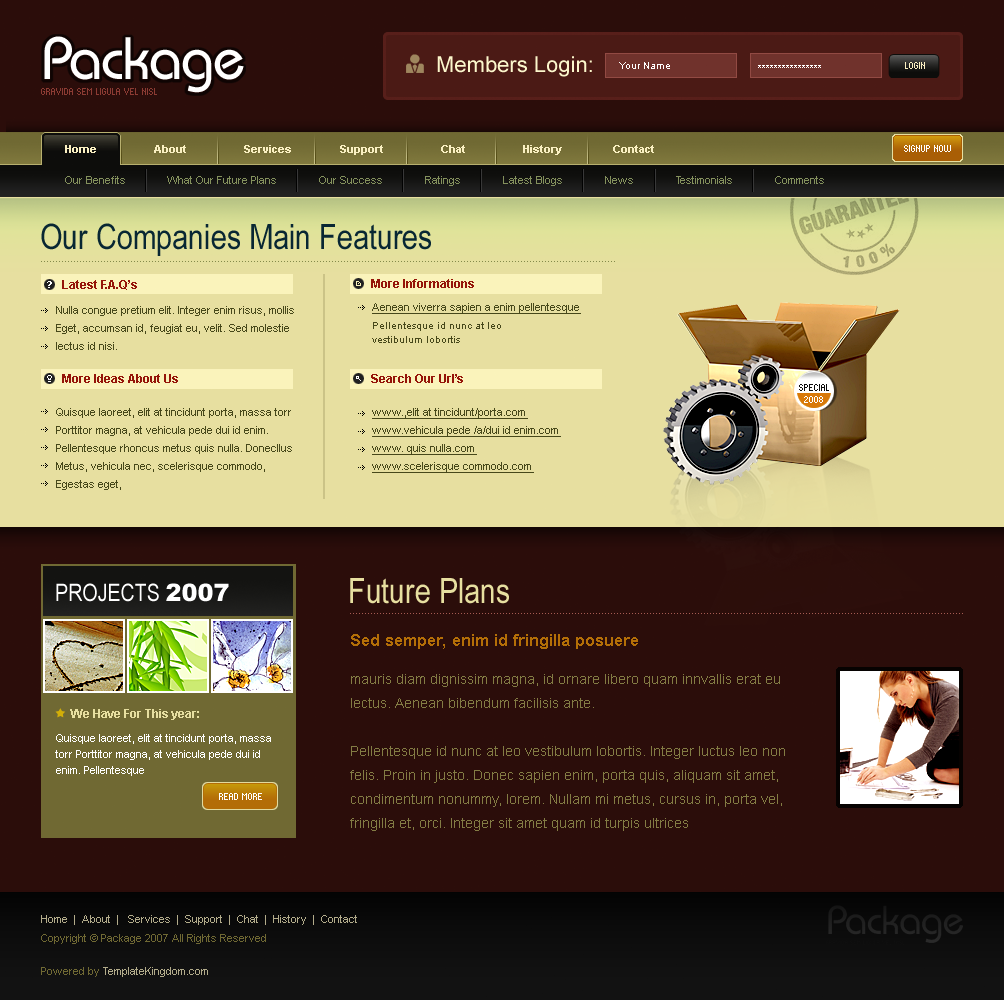
<style>
.page{position:relative;width:1004px;height:1000px;background:#2b0d0a}
.page>*{position:absolute;margin:0}
.t1{font:59.6px "BauhausITCbyBT-Medium";letter-spacing:-0.025em;color:#ffffff}
.t2{font:22px "ArialMT";color:#fcf7cc}
.t3{font:10px "ArialMT";color:#ffffff}
.t4{font:8px "Standard0757";color:#faf0c2;text-transform:uppercase}
.t5{font:8px "Standard0757";color:#8c3b33;text-transform:uppercase}
.t6{font:11px "Arial-BoldMT";color:#faf0c2}
.t7{font:8px "Standard0757";color:#ffffff;text-transform:uppercase}
.t8{font:11px "ArialMT";color:#84915d}
.t9{font:35px "ArialNarrow";color:#082733}
.t10{font:9px "Tahoma-Bold";color:#ffffff}
.t11{font:12px "Arial-BoldMT";color:#951509}
.t12{font:11px/18px "ArialMT";color:#47481a;text-decoration:underline}
.t13{font:10px/18px "ArialMT";color:#47481a}
.t14{font:10px/14px "ArialMT";color:#47481a}
.t15{font:11px/18px "ArialMT";color:#47481a}
.t16{font:8px "Standard0757";color:#0b0b0b;text-transform:uppercase}
.t17{font:35px "ArialNarrow";color:#e7dfa0}
.t18{font:24px "ArialNarrow";color:#ffffff;text-transform:uppercase}
.t19{font:24px "Arial-Black";color:#ffffff;text-transform:uppercase}
.t20{font:14px/24px "ArialMT";color:#837c44}
.t21{font:17px/14px "Arial-BoldMT";color:#b46f07}
.t22{font:12px "Arial-BoldMT";color:#e7dfa0}
.t23{font:11px/16px "ArialMT";color:#ffffff}
.t24{font:11px "ArialMT";color:#b3ac8b}
.t25{font:11px "ArialMT";color:#706933}
</style>
<div class="page">
<p class="t1" style="left:44px;top:36px;width:200px;height:57px">Package</p>
<p class="t2" style="left:437px;top:56px;width:155px;height:21px">Members Login:</p>
<p class="t3" style="left:619px;top:62px;width:51px;height:7px">Your Name</p>
<p class="t3" style="left:758px;top:65px;width:63px;height:3px">****************</p>
<p class="t4" style="left:905px;top:62px;width:20px;height:7px">Login</p>
<p class="t5" style="left:41px;top:88px;width:116px;height:7px">gravida sem ligula vel nisl</p>
<p class="t6" style="left:65px;top:145px;width:589px;height:10px">Home                   About                   Services                Support                   Chat                   History                 Contact</p>
<p class="t7" style="left:904px;top:145px;width:47px;height:7px">Signup Now</p>
<p class="t8" style="left:65px;top:176px;width:759px;height:10px">Our Benefits              What Our Future Plans              Our Success              Ratings              Latest Blogs              News              Testimonials              Comments</p>
<p class="t9" style="left:41px;top:223px;width:390px;height:33px">Our Companies Main Features</p>
<p class="t10" style="left:47px;top:281px;width:5px;height:7px">?</p>
<p class="t11" style="left:62px;top:280px;width:75px;height:10px">Latest F.A.Q’s</p>
<p class="t11" style="left:371px;top:279px;width:103px;height:9px">More Informations</p>
<p class="t12" style="left:372px;top:303px;width:209px;height:40px">Aenean viverra sapien a enim pellentesque<span class="t13"> Pellentesque id nunc at leo <br></span><span class="t14">vestibulum lobortis</span></p>
<p class="t15" style="left:56px;top:306px;width:238px;height:44px">Nulla congue pretium elit. Integer enim risus, mollis Eget, accumsan id, feugiat eu, velit. Sed molestie lectus id nisi.</p>
<p class="t11" style="left:62px;top:374px;width:116px;height:9px">More Ideas About Us</p>
<p class="t11" style="left:371px;top:374px;width:92px;height:9px">Search Our Url’s</p>
<p class="t16" style="left:799px;top:384px;width:30px;height:7px">special</p>
<p class="t7" style="left:804px;top:396px;width:19px;height:7px">2008</p>
<p class="t15" style="left:56px;top:408px;width:236px;height:82px">Quisque laoreet, elit at tincidunt porta, massa torr Porttitor magna, at vehicula pede dui id enim. Pellentesque rhoncus metus quis nulla. Donecllus Metus, vehicula nec, scelerisque commodo, Egestas eget,</p>
<p class="t12" style="left:372px;top:408px;width:189px;height:65px">www.,elit at tincidunt/porta.com<br>www.vehicula pede /a/dui id enim.com<br>www. quis nulla.com<br>www.scelerisque commodo.com</p>
<p class="t17" style="left:350px;top:578px;width:159px;height:26px">Future Plans</p>
<p class="t18" style="left:56px;top:583px;width:173px;height:19px">Projects <span class="t19">2007</span></p>
<p class="t20" style="left:350px;top:634px;width:435px;height:197px"><span class="t21">Sed semper, enim id fringilla posuere<br><br></span>mauris diam dignissim magna, id ornare libero quam innvallis erat eu lectus. Aenean bibendum facilisis ante. <br><br>Pellentesque id nunc at leo vestibulum lobortis. Integer luctus leo non felis. Proin in justo. Donec sapien enim, porta quis, aliquam sit amet, condimentum nonummy, lorem. Nullam mi metus, cursus in, porta vel, fringilla et, orci. Integer sit amet quam id turpis ultrices</p>
<p class="t22" style="left:70px;top:709px;width:129px;height:11px">We Have For This year:</p>
<p class="t23" style="left:55px;top:734px;width:216px;height:42px">Quisque laoreet, elit at tincidunt porta, massa torr Porttitor magna, at vehicula pede dui id enim. Pellentesque</p>
<p class="t7" style="left:219px;top:793px;width:43px;height:7px">Read More</p>
<p class="t24" style="left:41px;top:915px;width:316px;height:10px">Home  |  About  |   Services  |  Support  |  Chat  |  History  |  Contact</p>
<p class="t25" style="left:41px;top:934px;width:225px;height:10px">Copyright © Package 2007 All Rights Reserved</p>
<p class="t24" style="left:41px;top:967px;width:167px;height:10px"><span class="t25">Powered by </span>TemplateKingdom.com</p>
</div>
